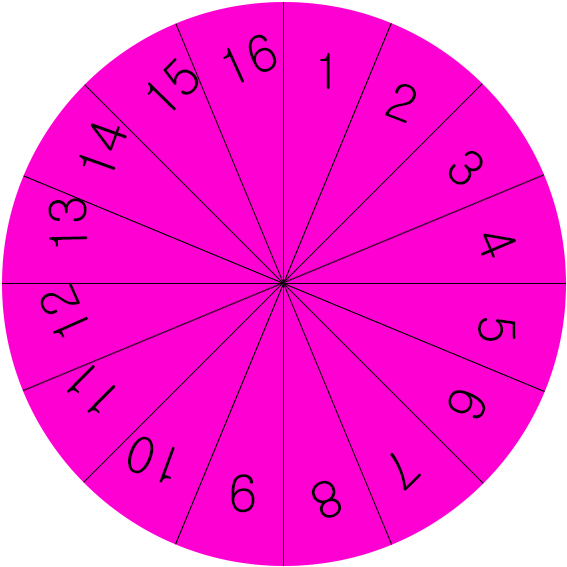
<style>
.page{position:relative;width:567px;height:567px;background:#ff00d2}
.page>*{position:absolute;margin:0}
.t1{font:50.3px "Gulim";color:#000000}
.t2{font:50.6px "Gulim";color:#000000}
.t3{font:50.2px "Gulim";color:#000000}
.t4{font:50.7px "Gulim";color:#000000}
.t5{font:50.5px "Gulim";color:#000000}
.t6{font:50.4px "Gulim";color:#000000}
</style>
<div class="page">
<p class="t1" style="left:223px;top:34px;width:54px;height:49px;rotate:-24deg">16</p>
<p class="t2" style="left:320px;top:53px;width:10px;height:36px">1</p>
<p class="t1" style="left:147px;top:58px;width:52px;height:53px;rotate:-46deg">15</p>
<p class="t2" style="left:384px;top:83px;width:32px;height:40px;rotate:21deg">2</p>
<p class="t2" style="left:79px;top:123px;width:48px;height:47px;rotate:-70deg">14</p>
<p class="t3" style="left:448px;top:151px;width:35px;height:34px;rotate:46deg">3</p>
<p class="t2" style="left:48px;top:198px;width:40px;height:49px;rotate:-91deg">13</p>
<p class="t1" style="left:481px;top:233px;width:35px;height:25px;rotate:67deg">4</p>
<p class="t3" style="left:40px;top:282px;width:48px;height:56px;rotate:-114deg">12</p>
<p class="t4" style="left:478px;top:318px;width:38px;height:23px;rotate:90deg">5</p>
<p class="t3" style="left:67px;top:365px;width:49px;height:49px;rotate:-135deg">11</p>
<p class="t4" style="left:448px;top:390px;width:38px;height:29px;rotate:111deg">6</p>
<p class="t5" style="left:128px;top:436px;width:47px;height:47px;rotate:-160deg">10</p>
<p class="t1" style="left:390px;top:452px;width:31px;height:39px;rotate:136deg">7</p>
<p class="t5" style="left:231px;top:474px;width:24px;height:39px;rotate:179deg">9</p>
<p class="t6" style="left:311px;top:480px;width:30px;height:38px;rotate:157deg">8</p>
</div>
